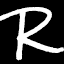
<style>
.page{position:relative;width:64px;height:64px;background:#000000}
.page>*{position:absolute;margin:0}
.t1{font:44px "RockSalt";color:#ffffff}
</style>
<div class="page">
<p class="t1" style="left:0px;top:7px;width:64px;height:54px">R</p>
</div>
